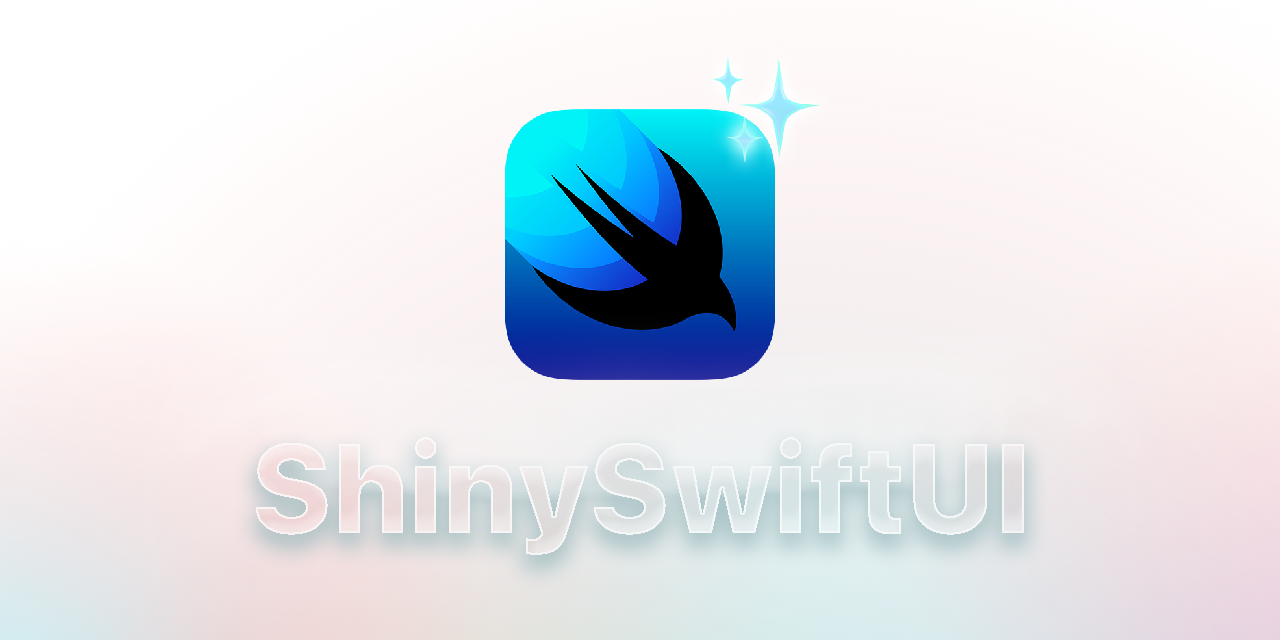
<style>
.page{position:relative;width:1280px;height:640px}
.page>*{position:absolute;margin:0}
.t1{font:126px "SFPro-Heavy";letter-spacing:0.02em;color:#ebe5e6;scale:0.96 1}
</style>
<div class="page">
<p class="t1" style="left:256px;top:437px;width:768px;height:118px">ShinySwiftUI</p>
</div>
